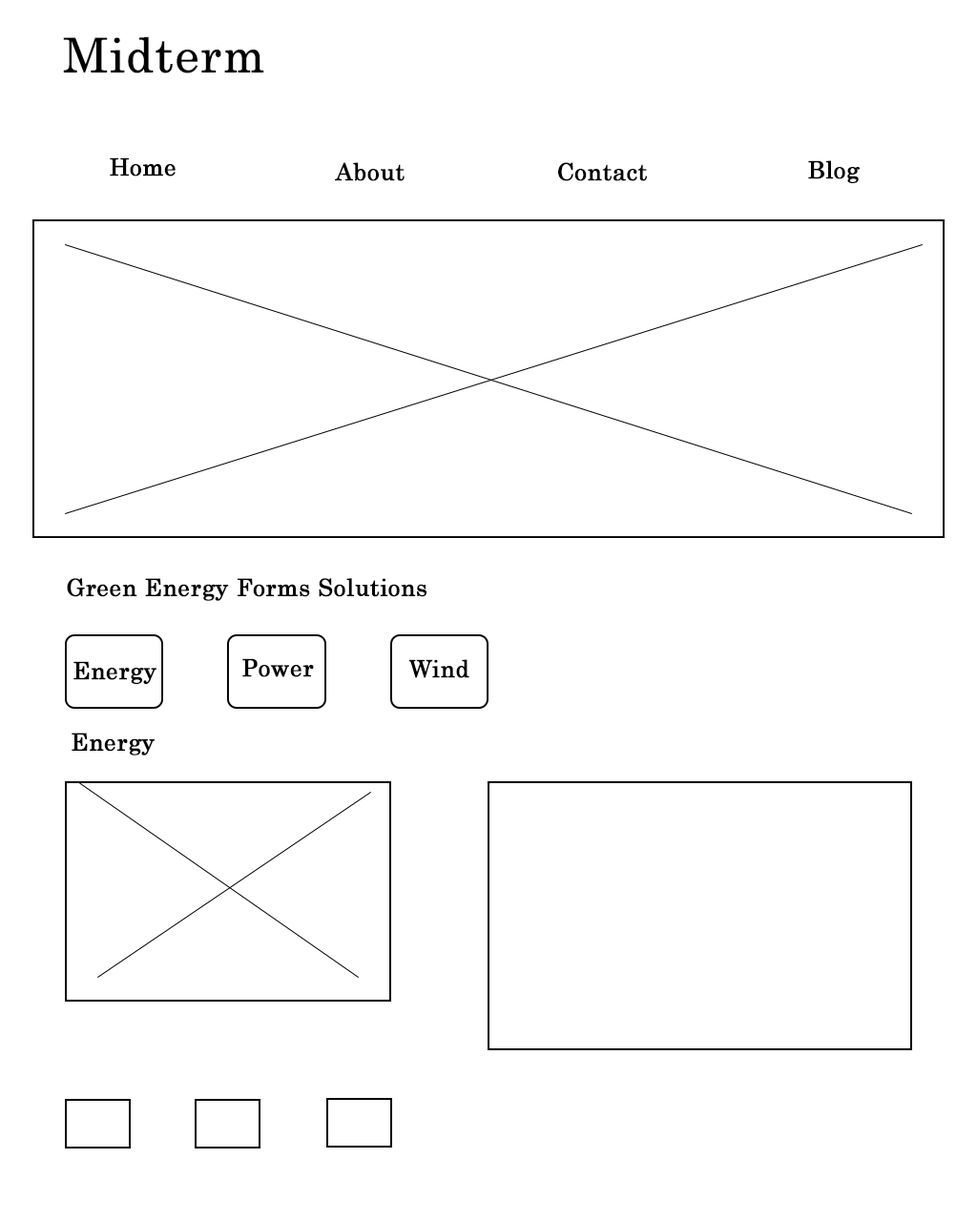
<style>
.page{position:relative;width:977px;height:1221px;background:#ffffff}
.page>*{position:absolute;margin:0}
.t1{font:47.7px "Century";letter-spacing:0.003em;color:#000000;font-weight:bold}
.t2{font:23.8px "Century";letter-spacing:0.003em;color:#000000;font-weight:bold}
</style>
<div class="page">
<p class="t1" style="left:63px;top:37px;width:201px;height:36px">Midterm</p>
<p class="t2" style="left:110px;top:157px;width:66px;height:19px">Home</p>
<p class="t2" style="left:808px;top:160px;width:51px;height:23px">Blog</p>
<p class="t2" style="left:335px;top:162px;width:69px;height:19px">About</p>
<p class="t2" style="left:558px;top:162px;width:89px;height:19px">Contact</p>
<p class="t2" style="left:67px;top:578px;width:359px;height:23px">Green Energy Forms Solutions</p>
<p class="t2" style="left:73px;top:661px;width:83px;height:23px">Energy</p>
<p class="t2" style="left:242px;top:658px;width:72px;height:19px">Power</p>
<p class="t2" style="left:408px;top:659px;width:61px;height:19px">Wind</p>
<p class="t2" style="left:72px;top:733px;width:83px;height:22px">Energy</p>
</div>
